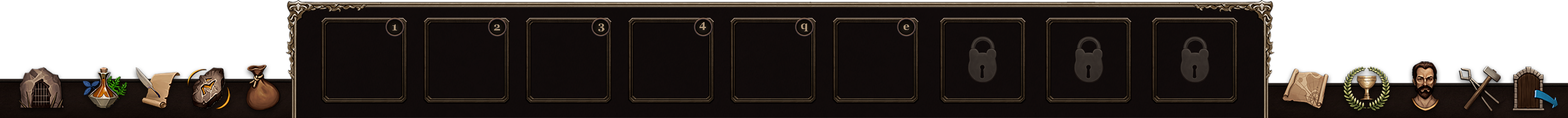
<style>
.page{position:relative;width:1568px;height:118px;background:#ffffff}
.page>*{position:absolute;margin:0}
.t1{font:11px "Georgia-Bold";color:#ae9679}
</style>
<div class="page">
<p class="t1" style="left:392px;top:24px;width:5px;height:6px">1</p>
<p class="t1" style="left:494px;top:24px;width:6px;height:6px">2</p>
<p class="t1" style="left:598px;top:24px;width:6px;height:7px">3</p>
<p class="t1" style="left:700px;top:22px;width:6px;height:8px">4</p>
<p class="t1" style="left:801px;top:24px;width:7px;height:7px">q</p>
<p class="t1" style="left:904px;top:24px;width:5px;height:6px">e</p>
</div>
